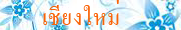
<style>
.page{position:relative;width:181px;height:30px}
.page>*{position:absolute;margin:0}
.t1{font:30px "AngsanaUPC";letter-spacing:0.025em;color:#f96308}
</style>
<div class="page">
<p class="t1" style="left:43px;top:0px;width:76px;height:25px">เชียงใหม่</p>
</div>
